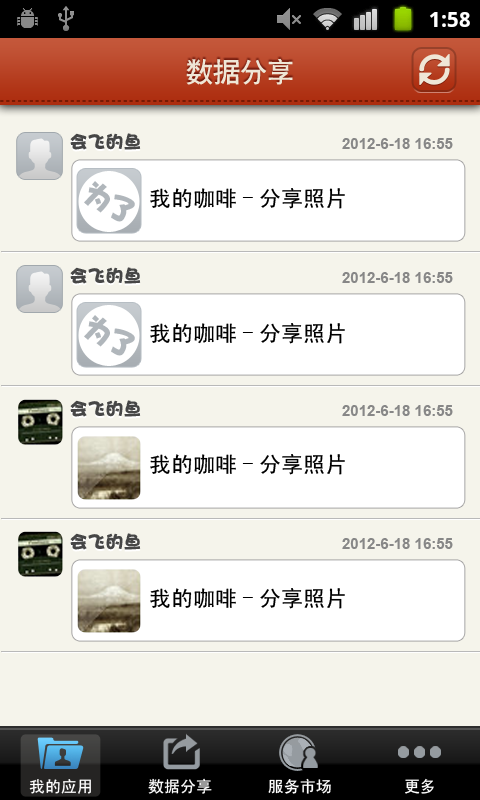
<style>
.page{position:relative;width:480px;height:800px;background:#f5f4eb}
.page>*{position:absolute;margin:0}
.t1{font:27px "CTCuHeiSJ";color:#efe6d6}
.t2{font:18px "DFHaiBaoW12";color:#464646}
.t3{font:15px "Arial-BoldMT";color:#878787}
.t4{font:22px "SimHei";color:#000000}
.t5{font:29.5px "DFHaiBaoW12";letter-spacing:-0.14em;color:#b0b6bb}
.t6{font:16px "SimHei";color:#ffffff}
</style>
<div class="page">
<p class="t1" style="left:186px;top:58px;width:107px;height:27px">数据分享</p>
<p class="t2" style="left:70px;top:133px;width:71px;height:17px">会飞的鱼</p>
<p class="t3" style="left:342px;top:138px;width:111px;height:11px">2012-6-18 16:55</p>
<p class="t4" style="left:150px;top:188px;width:195px;height:21px">我的咖啡-分享照片</p>
<p class="t2" style="left:70px;top:267px;width:71px;height:17px">会飞的鱼</p>
<p class="t3" style="left:342px;top:272px;width:111px;height:11px">2012-6-18 16:55</p>
<p class="t5" style="left:84px;top:315px;width:51px;height:41px;rotate:28deg">为了</p>
<p class="t4" style="left:150px;top:323px;width:195px;height:21px">我的咖啡-分享照片</p>
<p class="t2" style="left:70px;top:400px;width:71px;height:17px">会飞的鱼</p>
<p class="t3" style="left:342px;top:405px;width:111px;height:11px">2012-6-18 16:55</p>
<p class="t4" style="left:150px;top:454px;width:195px;height:21px">我的咖啡-分享照片</p>
<p class="t2" style="left:70px;top:533px;width:71px;height:17px">会飞的鱼</p>
<p class="t3" style="left:342px;top:538px;width:111px;height:11px">2012-6-18 16:55</p>
<p class="t4" style="left:150px;top:588px;width:195px;height:21px">我的咖啡-分享照片</p>
<p class="t6" style="left:29px;top:779px;width:62px;height:15px">我的应用</p>
<p class="t6" style="left:148px;top:778px;width:64px;height:16px">数据分享</p>
<p class="t6" style="left:268px;top:778px;width:63px;height:16px">服务市场</p>
<p class="t6" style="left:405px;top:778px;width:29px;height:16px">更多</p>
</div>
